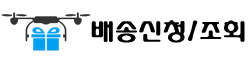
<style>
.page{position:relative;width:250px;height:60px;background:#ffffff}
.page>*{position:absolute;margin:0}
.t1{font:24px "HYdnkM";letter-spacing:-0.025em;color:#020001;font-weight:bold}
.t2{font:24px "MDSol";letter-spacing:-0.025em;color:#020001;font-weight:bold}
.t3{font:24px "HYdnkM";letter-spacing:-0.025em;color:#000000;font-weight:bold}
</style>
<div class="page">
<p class="t1" style="left:91px;top:20px;width:154px;height:23px">배송신청<span class="t2">/</span><span class="t3">조</span>회</p>
</div>
